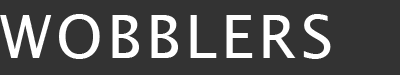
<style>
.page{position:relative;width:400px;height:75px;background:#333333}
.page>*{position:absolute;margin:0}
.t1{font:60px "LucidaSansUnicode";letter-spacing:0.075em;color:#ffffff}
</style>
<div class="page">
<p class="t1" style="left:0px;top:14px;width:331px;height:45px">WOBBLERS</p>
</div>
